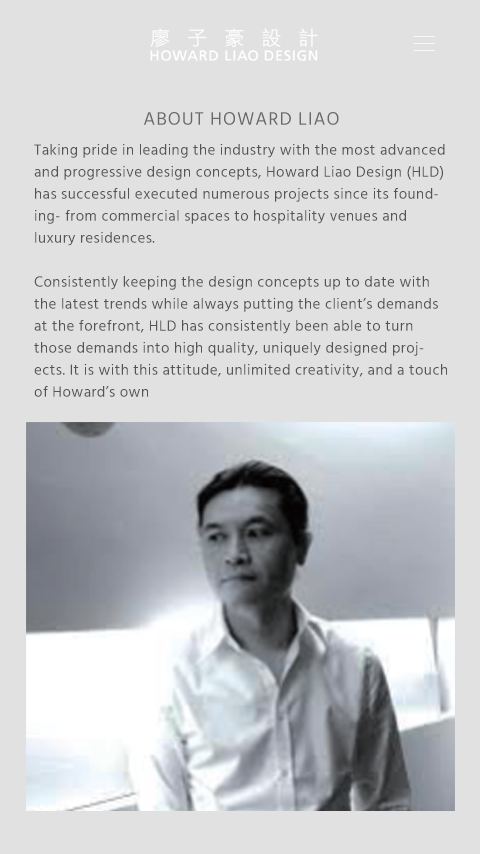
<style>
.page{position:relative;width:480px;height:854px;background:#e1e1e1}
.page>*{position:absolute;margin:0}
.t1{font:18.3px "Hind-Regular";letter-spacing:0.05em;color:#696969}
.t2{font:15px/22px "Hind-Regular";letter-spacing:0.03em;color:#545454}
</style>
<div class="page">
<p class="t1" style="left:144px;top:112px;width:195px;height:13px">ABOUT HOWARD LIAO</p>
<p class="t2" style="left:34px;top:143px;width:413px;height:254px">Taking pride in leading the industry with the most advanced and progressive design concepts, Howard Liao Design (HLD) has successful executed numerous projects since its founding- from commercial spaces to hospitality venues and luxury residences. <br><br>Consistently keeping the design concepts up to date with the latest trends while always putting the client’s demands at the forefront, HLD has consistently been able to turn those demands into high quality, uniquely designed projects. It is with this attitude, unlimited creativity, and a touch of Howard’s own</p>
</div>
